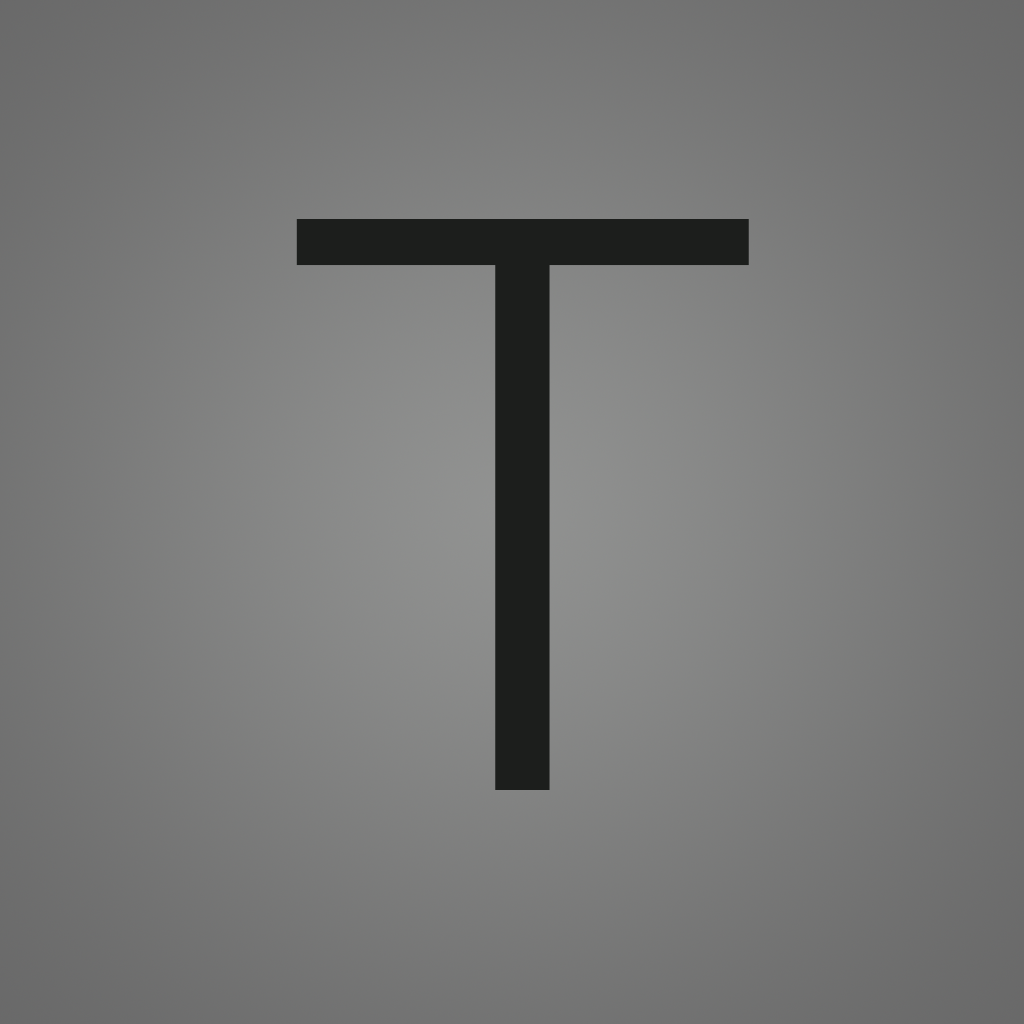
<style>
.page{position:relative;width:1024px;height:1024px}
.page>*{position:absolute;margin:0}
.t1{font:800px "HelveticaNeue-Light";color:#1c1e1c}
</style>
<div class="page">
<p class="t1" style="left:296px;top:219px;width:453px;height:571px">T</p>
</div>
